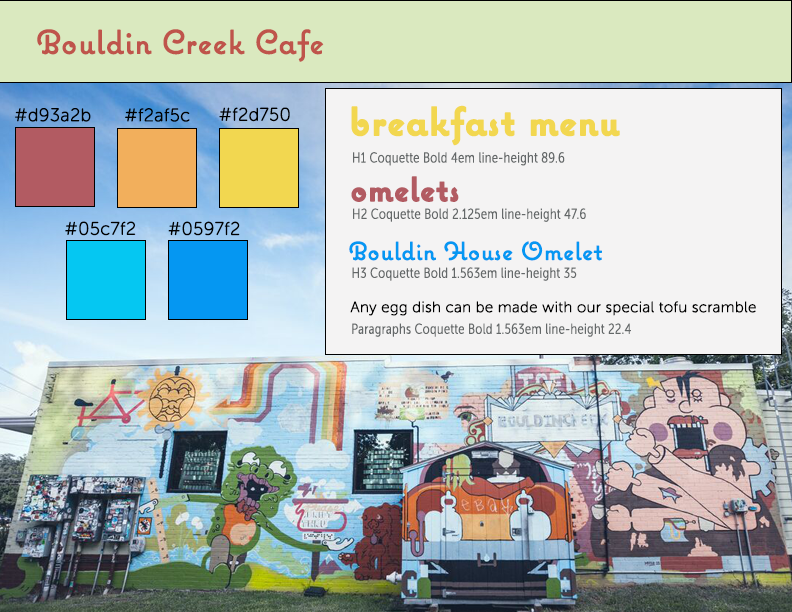
<style>
.page{position:relative;width:792px;height:612px;background:#f4f3f3}
.page>*{position:absolute;margin:0}
.t1{font:33px "Coquette";letter-spacing:0.01em;color:#bf544b;font-weight:bold}
.t2{font:18px "MuseoSansRounded-100";letter-spacing:0.01em;color:#000000;font-weight:bold}
.t3{font:40px "Coquette-Bold";letter-spacing:0.01em;color:#f2d750;font-weight:bold}
.t4{font:14px "MuseoSansCond-100";letter-spacing:0.01em;color:#646869;font-weight:bold}
.t5{font:34px "Coquette-Bold";letter-spacing:0.01em;color:#b25b62;font-weight:bold}
.t6{font:25px "Coquette";letter-spacing:0.01em;color:#0597f2;font-weight:bold}
.t7{font:15px "MuseoSansRounded-100";letter-spacing:0.01em;color:#000000;font-weight:bold}
</style>
<div class="page">
<p class="t1" style="left:37px;top:29px;width:287px;height:33px">Bouldin Creek Cafe</p>
<p class="t2" style="left:15px;top:108px;width:76px;height:14px">#d93a2b</p>
<p class="t2" style="left:125px;top:108px;width:65px;height:14px">#f2af5c</p>
<p class="t2" style="left:219px;top:107px;width:71px;height:15px">#f2d750</p>
<p class="t3" style="left:351px;top:105px;width:269px;height:41px">breakfast menu</p>
<p class="t4" style="left:353px;top:152px;width:212px;height:14px">H1 Coquette Bold 4em line-height 89.6</p>
<p class="t5" style="left:351px;top:176px;width:108px;height:26px">omelets</p>
<p class="t4" style="left:353px;top:208px;width:233px;height:14px">H2 Coquette Bold 2.125em line-height 47.6</p>
<p class="t2" style="left:65px;top:221px;width:71px;height:15px">#05c7f2</p>
<p class="t2" style="left:168px;top:221px;width:72px;height:15px">#0597f2</p>
<p class="t6" style="left:349px;top:241px;width:253px;height:20px">Bouldin House Omelet</p>
<p class="t4" style="left:352px;top:267px;width:225px;height:14px">H3 Coquette Bold 1.563em line-height 35</p>
<p class="t7" style="left:350px;top:301px;width:406px;height:15px">Any egg dish can be made with our special tofu scramble</p>
<p class="t4" style="left:352px;top:323px;width:279px;height:14px">Paragraphs Coquette Bold 1.563em line-height 22.4</p>
</div>
